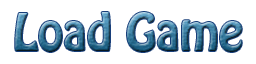
<style>
.page{position:relative;width:256px;height:64px;background:#ffffff}
.page>*{position:absolute;margin:0}
.t1{font:46px "HoboStd"}
</style>
<div class="page">
<p class="t1" style="left:15px;top:12px;width:227px;height:40px">Load Game</p>
</div>
